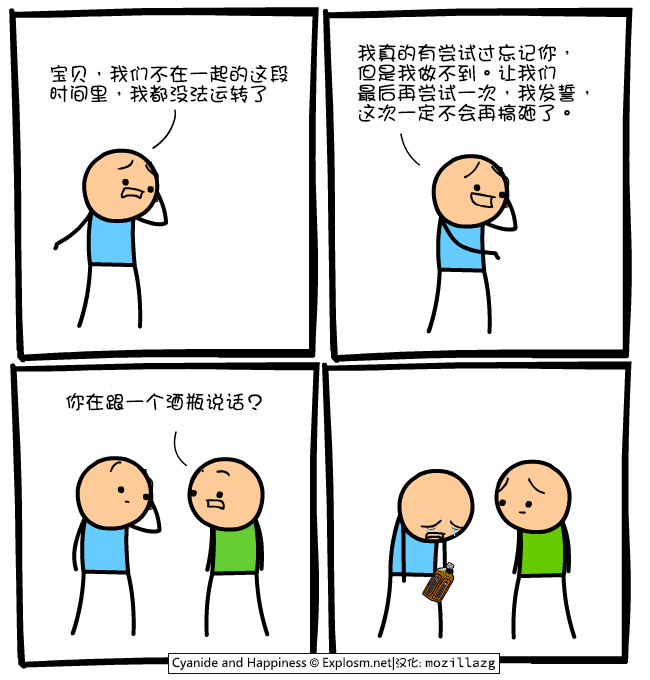
<style>
.page{position:relative;width:650px;height:680px;background:#ffffff}
.page>*{position:absolute;margin:0}
.t1{font:20px/20px "DFGirl";color:#000000}
.t2{font:20px "DFGirl";color:#000000}
</style>
<div class="page">
<p class="t1" style="left:357px;top:43px;width:232px;height:79px">我真的有尝试过忘记你，<br>但是我做不到。让我们<br>最后再尝试一次，我发誓，<br>这次一定不会再搞砸了。</p>
<p class="t1" style="left:50px;top:64px;width:238px;height:39px">宝贝，我们不在一起的这段<br>时间里，我都没法运转了</p>
<p class="t2" style="left:65px;top:393px;width:197px;height:18px">你在跟一个酒瓶说话？</p>
</div>
